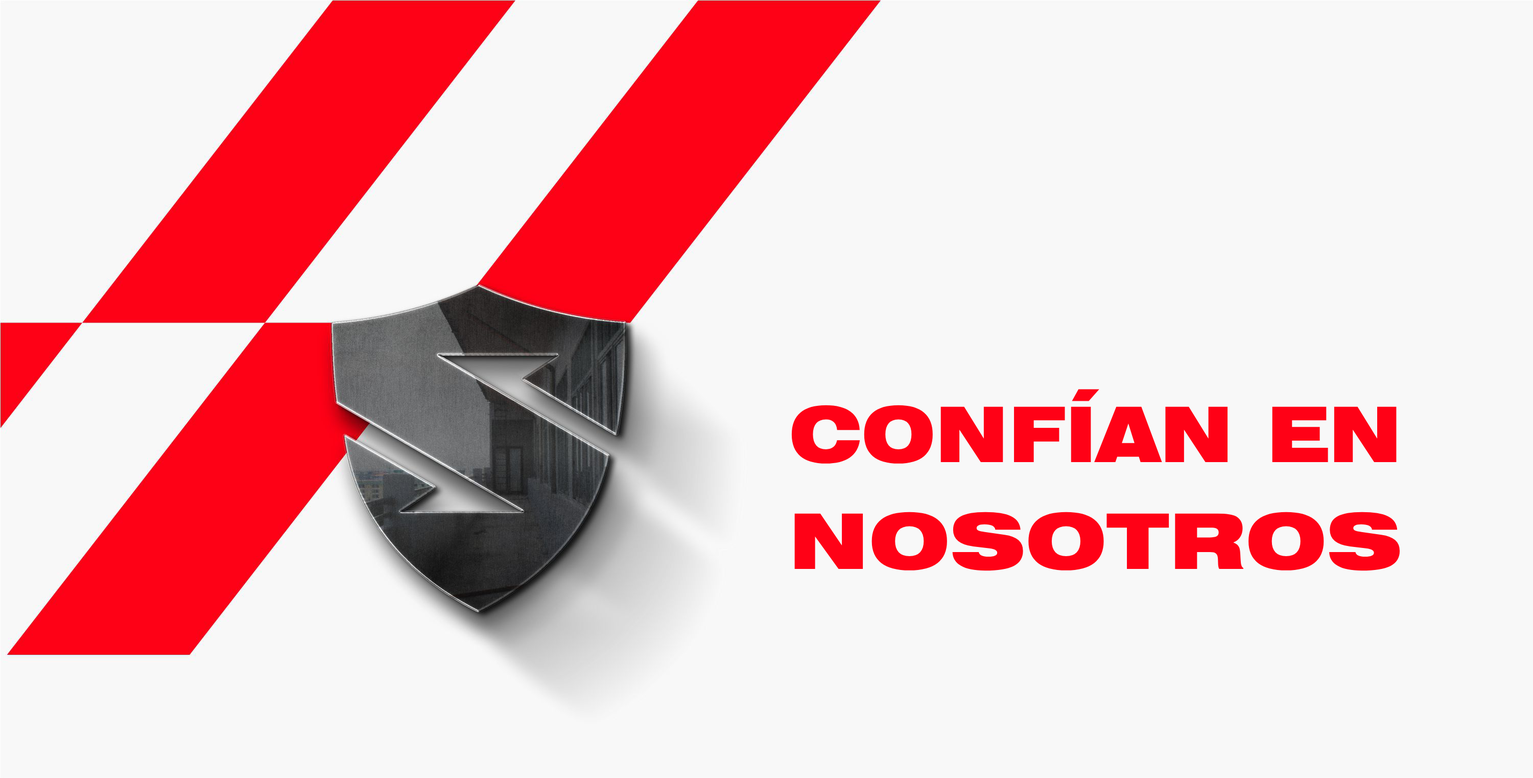
<style>
.page{position:relative;width:1533px;height:778px;background:#f8f8f8}
.page>*{position:absolute;margin:0}
.t1{font:76.6px/51.1px "Swiss721BT-BlackExtended";color:#ff0116;scale:0.92 1}
.t2{font:76.6px/106.7px "Swiss721BT-BlackExtended";color:#ff0116}
</style>
<div class="page">
<p class="t1" style="left:791px;top:389px;width:610px;height:182px;text-align:center">CONFÍAN EN <span class="t2">NOSOTROS</span></p>
</div>
